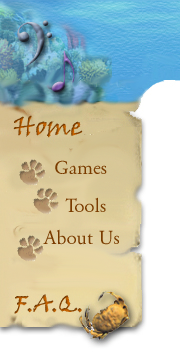
<style>
.page{position:relative;width:180px;height:360px}
.page>*{position:absolute;margin:0}
.t1{font:40px "Maestro"}
.t2{font:20px "Garamond-Normal";color:#7a3c00}
</style>
<div class="page">
<p class="t1" style="left:51px;top:50px;width:24px;height:43px">e</p>
<p class="t2" style="left:55px;top:160px;width:52px;height:14px">Games</p>
<p class="t2" style="left:65px;top:197px;width:41px;height:15px">Tools</p>
<p class="t2" style="left:43px;top:229px;width:76px;height:16px">About Us</p>
</div>
